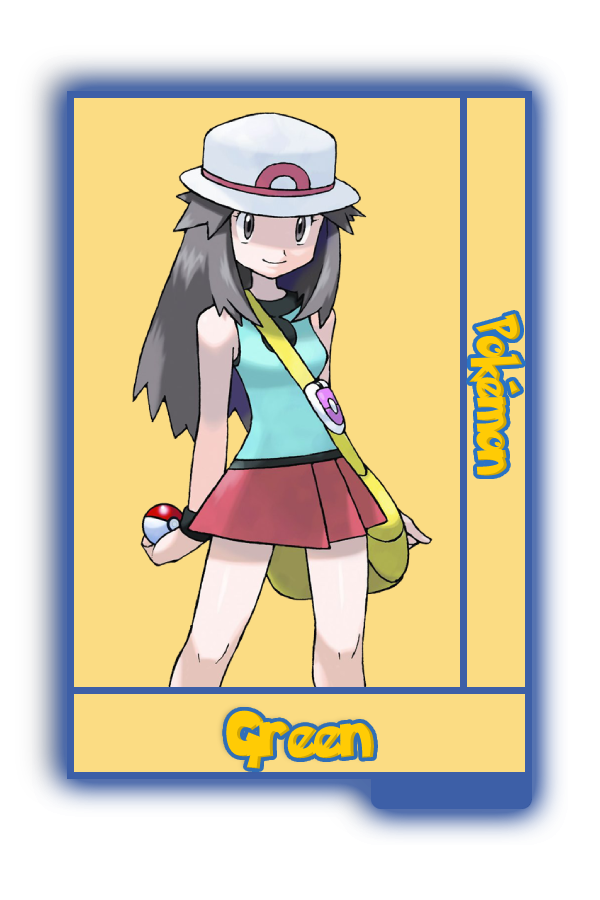
<style>
.page{position:relative;width:600px;height:900px;background:#fbdc83}
.page>*{position:absolute;margin:0}
.t1{font:48.8px "PokemonSolidNormal";color:#ffcb05;scale:0.8 1}
.t2{font:56.6px "PokemonSolidNormal";color:#ffcb05;scale:0.92 1}
</style>
<div class="page">
<p class="t1" style="left:469px;top:313px;width:54px;height:163px;rotate:90deg">Pokémon</p>
<p class="t2" style="left:226px;top:710px;width:148px;height:59px">Green</p>
</div>
